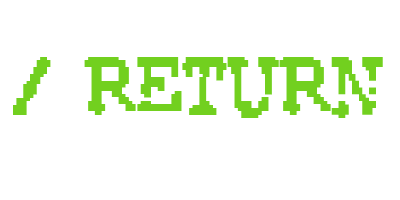
<style>
.page{position:relative;width:400px;height:200px;background:#ffffff}
.page>*{position:absolute;margin:0}
.t1{font:68px "RubberBiscuitBold";color:#72d01f}
</style>
<div class="page">
<p class="t1" style="left:13px;top:57px;width:370px;height:61px">/ return</p>
</div>
